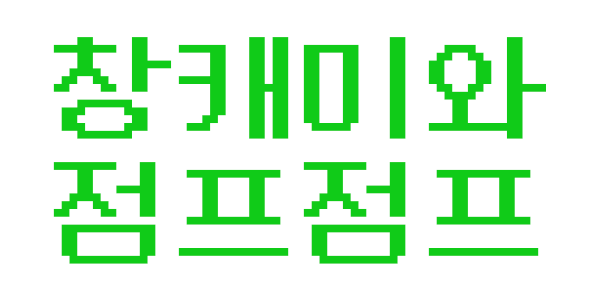
<style>
.page{position:relative;width:600px;height:300px;background:#ffffff}
.page>*{position:absolute;margin:0}
.t1{font:125px/125px "NeoDunggeunmo-Regular";color:#10cb18}
</style>
<div class="page">
<p class="t1" style="left:53px;top:37px;width:493px;height:227px;text-align:center">창캐미와<br>점프점프</p>
</div>
